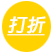
<style>
.page{position:relative;width:53px;height:53px;background:#ffd200}
.page>*{position:absolute;margin:0}
.t1{font:18px "AdobeFanHeitiStd-Bold";color:#ffffff;font-weight:bold;font-style:italic;text-decoration:underline}
</style>
<div class="page">
<p class="t1" style="left:7px;top:16px;width:39px;height:20px">打折</p>
</div>
